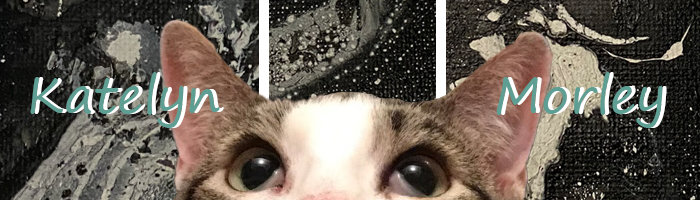
<style>
.page{position:relative;width:700px;height:200px}
.page>*{position:absolute;margin:0}
.t1{font:50px "SegoePrint";color:#ffffff}
</style>
<div class="page">
<p class="t1" style="left:34px;top:72px;width:190px;height:56px">Katelyn</p>
<p class="t1" style="left:500px;top:72px;width:167px;height:56px">Morley</p>
</div>
